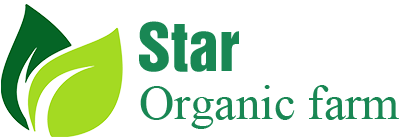
<style>
.page{position:relative;width:400px;height:140px;background:#ffffff}
.page>*{position:absolute;margin:0}
.t1{font:60.9px "UTM-HelvetIns";color:#198754}
.t2{font:48.7px "TimesNewRomanPSMT";color:#198754}
</style>
<div class="page">
<p class="t1" style="left:139px;top:21px;width:100px;height:51px">Star</p>
<p class="t2" style="left:140px;top:85px;width:259px;height:44px">Organic farm</p>
</div>
